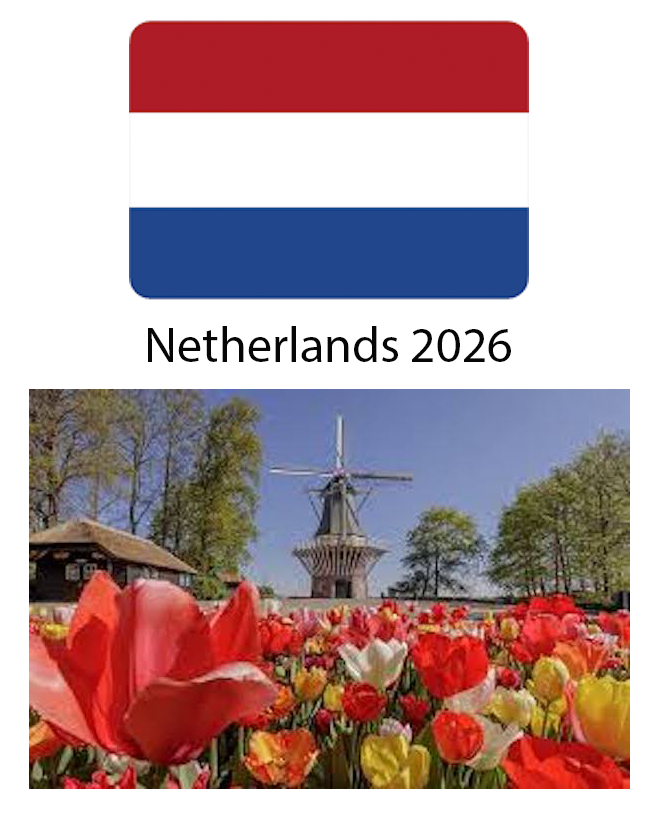
<style>
.page{position:relative;width:659px;height:837px;background:#ffffff}
.page>*{position:absolute;margin:0}
.t1{font:50px "MyriadPro-Regular";color:#060606}
</style>
<div class="page">
<p class="t1" style="left:148px;top:326px;width:363px;height:36px">Netherlands 2026</p>
</div>
